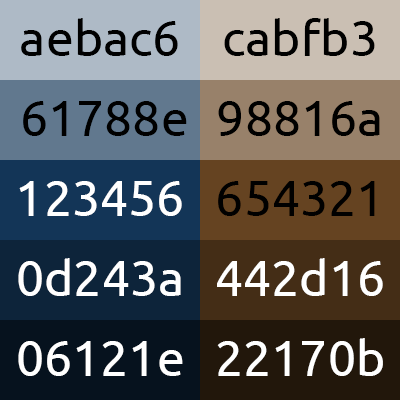
<style>
.page{position:relative;width:400px;height:400px}
.page>*{position:absolute;margin:0}
.t1{font:50px "Ubuntu";color:#000000}
.t2{font:50px "Ubuntu";color:#ffffff}
</style>
<div class="page">
<p class="t1" style="left:21px;top:18px;width:157px;height:38px">aebac6</p>
<p class="t1" style="left:224px;top:18px;width:151px;height:38px">cabfb3</p>
<p class="t1" style="left:23px;top:101px;width:164px;height:35px">61788e</p>
<p class="t1" style="left:218px;top:101px;width:162px;height:35px">98816a</p>
<p class="t2" style="left:19px;top:181px;width:163px;height:35px">123456</p>
<p class="t1" style="left:218px;top:181px;width:157px;height:35px">654321</p>
<p class="t2" style="left:18px;top:258px;width:163px;height:38px">0d243a</p>
<p class="t2" style="left:217px;top:258px;width:166px;height:38px">442d16</p>
<p class="t2" style="left:18px;top:341px;width:165px;height:35px">06121e</p>
<p class="t2" style="left:217px;top:338px;width:166px;height:38px">22170b</p>
</div>
